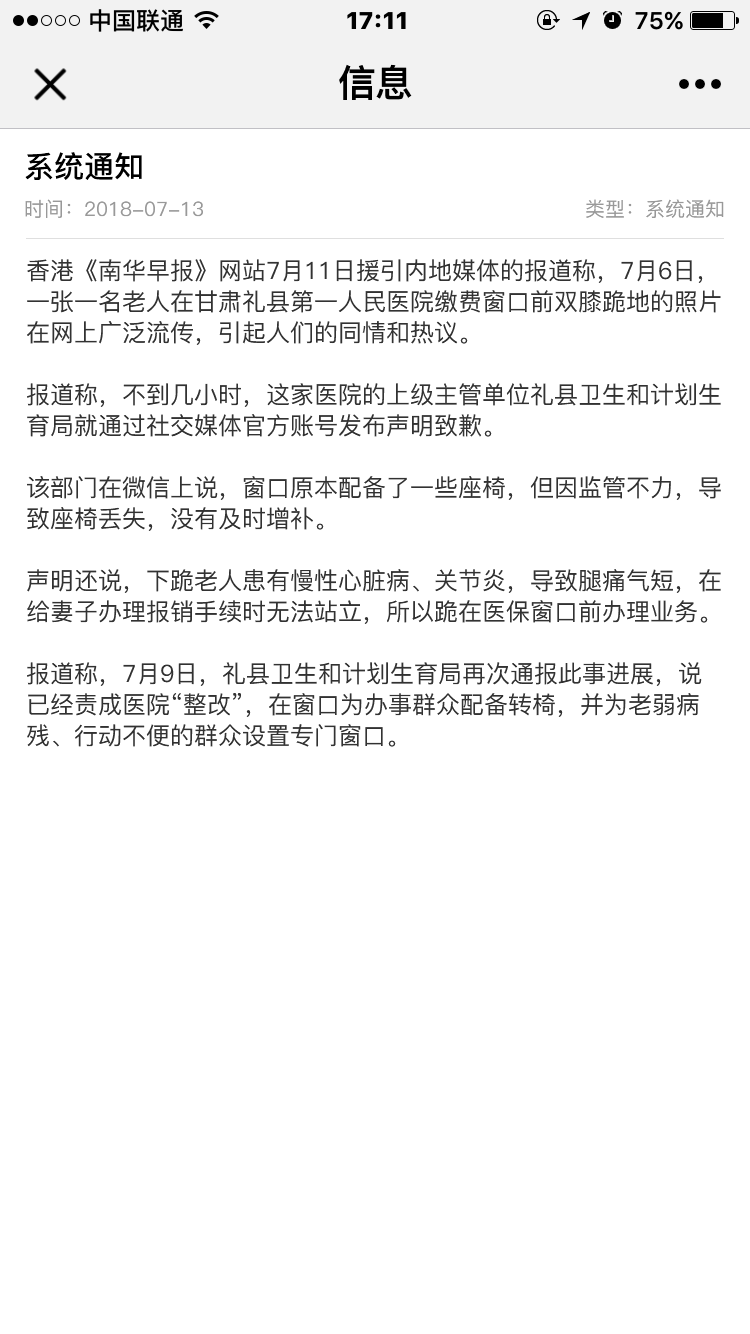
<style>
.page{position:relative;width:750px;height:1334px;background:#ffffff}
.page>*{position:absolute;margin:0}
.t1{font:37.6px "PingFang-SC-Heavy";color:#000000}
.t2{font:30px "PingFang-SC-Bold";color:#000000}
.t3{font:20px "PingFang-SC-Medium";color:#999999}
.t4{font:24px/31px "PingFang-SC-Medium";color:#323232}
</style>
<div class="page">
<p class="t1" style="left:339px;top:64px;width:73px;height:36px">信息</p>
<p class="t2" style="left:25px;top:152px;width:117px;height:28px">系统通知</p>
<p class="t3" style="left:25px;top:199px;width:178px;height:19px">时间：2018-07-13</p>
<p class="t3" style="left:586px;top:199px;width:138px;height:19px">类型：系统通知</p>
<p class="t4" style="left:27px;top:259px;width:694px;height:488px">香港《南华早报》网站7月11日援引内地媒体的报道称，7月6日，一张一名老人在甘肃礼县第一人民医院缴费窗口前双膝跪地的照片在网上广泛流传，引起人们的同情和热议。<br><br>报道称，不到几小时，这家医院的上级主管单位礼县卫生和计划生育局就通过社交媒体官方账号发布声明致歉。<br><br>该部门在微信上说，窗口原本配备了一些座椅，但因监管不力，导致座椅丢失，没有及时增补。<br><br>声明还说，下跪老人患有慢性心脏病、关节炎，导致腿痛气短，在给妻子办理报销手续时无法站立，所以跪在医保窗口前办理业务。<br><br>报道称，7月9日，礼县卫生和计划生育局再次通报此事进展，说已经责成医院“整改”，在窗口为办事群众配备转椅，并为老弱病残、行动不便的群众设置专门窗口。</p>
</div>
